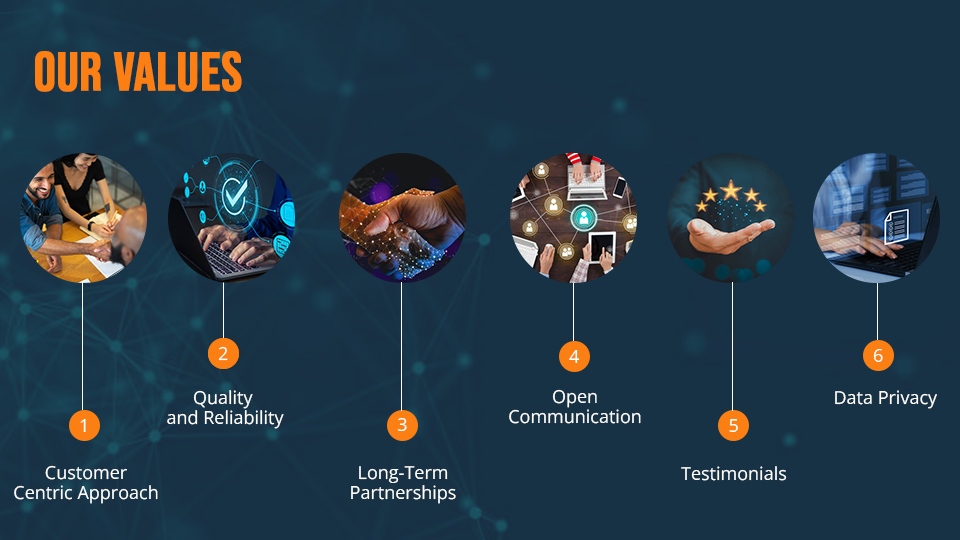
<style>
.page{position:relative;width:960px;height:540px;background:#173145}
.page>*{position:absolute;margin:0}
.t1{font:54px "BebasNeue-Regular";color:#fb7f12;font-weight:bold}
.t2{font:18px "OpenSans-Regular";color:#ffffff}
.t3{font:18px/20px "OpenSans-Regular";color:#ffffff}
</style>
<div class="page">
<p class="t1" style="left:35px;top:51px;width:207px;height:41px">OUR VALUES</p>
<p class="t2" style="left:218px;top:346px;width:10px;height:15px">2</p>
<p class="t2" style="left:569px;top:350px;width:11px;height:13px">4</p>
<p class="t2" style="left:873px;top:349px;width:10px;height:13px">6</p>
<p class="t3" style="left:167px;top:390px;width:117px;height:39px;text-align:center">Quality <br>and Reliability</p>
<p class="t3" style="left:509px;top:389px;width:132px;height:35px;text-align:center">Open<br>Communication</p>
<p class="t2" style="left:835px;top:390px;width:102px;height:19px">Data Privacy</p>
<p class="t2" style="left:80px;top:419px;width:6px;height:13px">1</p>
<p class="t2" style="left:397px;top:418px;width:10px;height:13px">3</p>
<p class="t2" style="left:729px;top:419px;width:9px;height:13px">5</p>
<p class="t3" style="left:14px;top:465px;width:144px;height:39px;text-align:center">Customer<br>Centric Approach</p>
<p class="t3" style="left:351px;top:466px;width:105px;height:38px;text-align:center">Long-Term<br>Partnerships</p>
<p class="t2" style="left:681px;top:466px;width:106px;height:15px">Testimonials</p>
</div>
